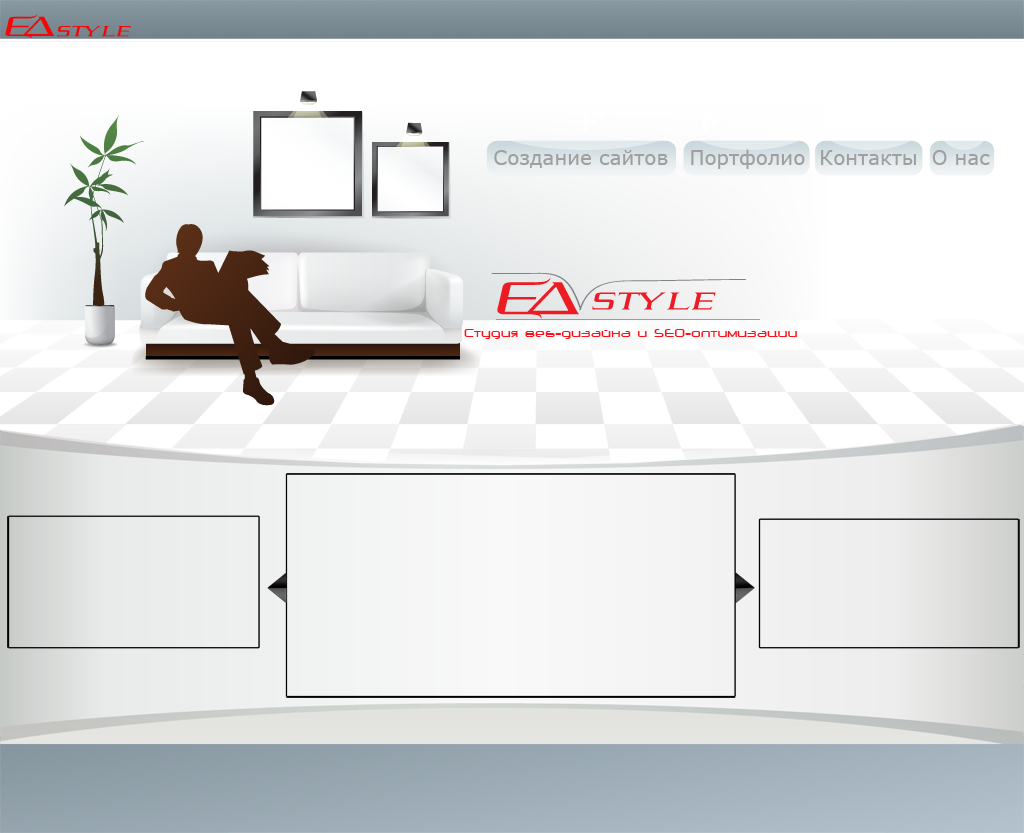
<style>
.page{position:relative;width:1024px;height:833px}
.page>*{position:absolute;margin:0}
.t1{font:21.9px "Elektra-Regular";color:#f30606}
.t2{font:18.3px "Elektra-Regular";color:#f30606}
.t3{font:20px "Verdana";color:#9e9f9e}
.t4{font:12.2px "NeuropolMedium";color:#fd0f1a}
</style>
<div class="page">
<p class="t1" style="left:5px;top:14px;width:50px;height:25px">EA</p>
<p class="t2" style="left:57px;top:26px;width:74px;height:11px">style</p>
<p class="t3" style="left:494px;top:149px;width:496px;height:20px">Создание сайтов   Портфолио  Контакты  О нас</p>
<p class="t4" style="left:464px;top:329px;width:333px;height:10px">Студия веб-дизайна и SEO-оптимизации</p>
</div>
